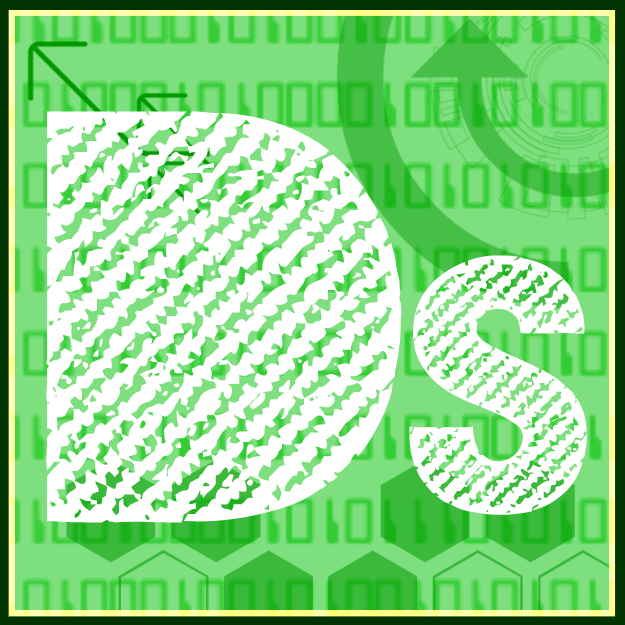
<style>
.page{position:relative;width:625px;height:625px;background:#ffffff}
.page>*{position:absolute;margin:0}
.t1{font:547.1px "GoodMorningAfternoonDEMO";color:#ffffff}
.t2{font:349.4px "GoodMorningAfternoonDEMO";color:#ffffff}
</style>
<div class="page">
<p class="t1" style="left:46px;top:111px;width:356px;height:412px">D</p>
<p class="t2" style="left:409px;top:255px;width:178px;height:260px">S</p>
</div>
